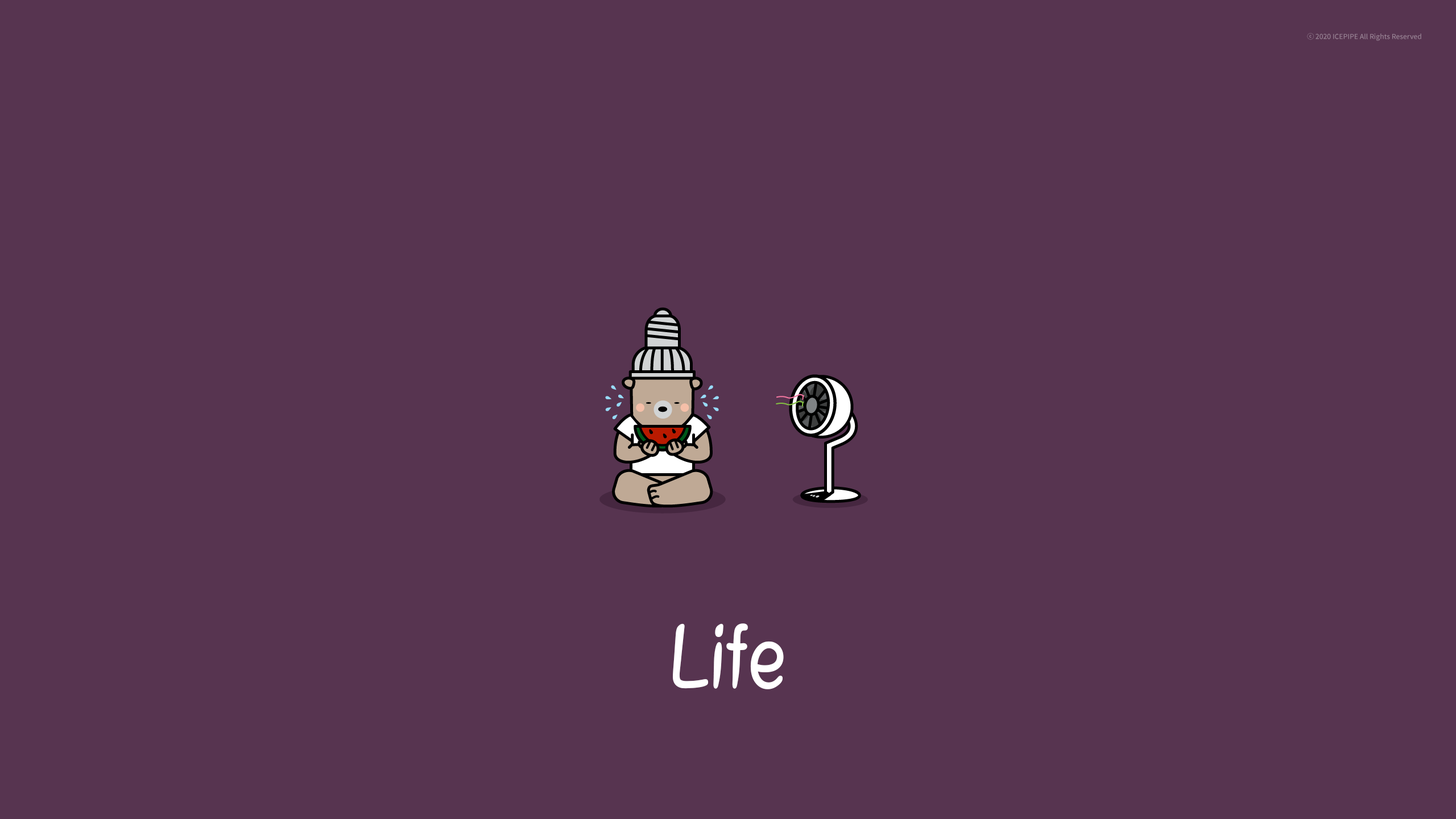
<style>
.page{position:relative;width:1456px;height:819px;background:#573450}
.page>*{position:absolute;margin:0}
.t1{font:87.5px "MDAlong";color:#ffffff;font-weight:bold;scale:0.81 1}
</style>
<div class="page">
<p class="t1" style="left:673px;top:623px;width:111px;height:66px">Life</p>
</div>
